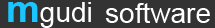
<style>
.page{position:relative;width:215px;height:28px;background:#333333}
.page>*{position:absolute;margin:0}
.t1{font:28px "ArialMT";color:#ffffff}
.t2{font:38px "Arial-BoldMT";color:#1ac6ff}
</style>
<div class="page">
<p class="t1" style="left:8px;top:2px;width:83px;height:26px"><span class="t2">m</span>gudi</p>
<p class="t1" style="left:105px;top:3px;width:105px;height:20px">software</p>
</div>
